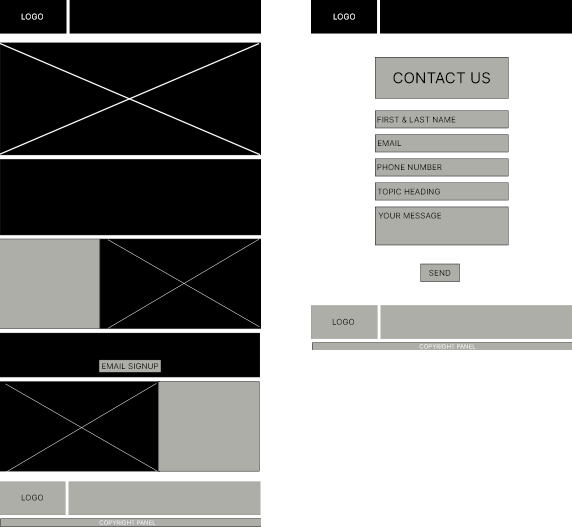
<style>
.page{position:relative;width:572px;height:527px;background:#ffffff}
.page>*{position:absolute;margin:0}
.t1{font:8px "Inter-Regular";text-transform:uppercase}
.t2{font:15px "Inter-Regular";color:#000000;text-transform:uppercase}
.t3{font:8px "Inter-Regular";color:#000000;text-transform:uppercase}
.t4{font:6px "Inter-Regular";color:#ffffff;text-transform:uppercase}
.t5{font:6px "Inter-Regular";text-transform:uppercase}
</style>
<div class="page">
<p class="t1" style="left:21px;top:13px;width:22px;height:7px">LOGO</p>
<p class="t1" style="left:333px;top:13px;width:22px;height:7px">LOGO</p>
<p class="t2" style="left:393px;top:72px;width:97px;height:12px">Contact US</p>
<p class="t3" style="left:377px;top:116px;width:79px;height:7px">First &amp; Last name</p>
<p class="t1" style="left:378px;top:140px;width:23px;height:6px">EMAIL</p>
<p class="t3" style="left:377px;top:164px;width:65px;height:6px">Phone Number</p>
<p class="t3" style="left:377px;top:188px;width:63px;height:7px">topic heading</p>
<p class="t1" style="left:378px;top:212px;width:63px;height:7px">Your Message</p>
<p class="t3" style="left:429px;top:269px;width:22px;height:7px">SEND</p>
<p class="t1" style="left:332px;top:318px;width:22px;height:7px">LOGO</p>
<p class="t4" style="left:419px;top:344px;width:57px;height:5px">Copyright Panel</p>
<p class="t3" style="left:102px;top:363px;width:57px;height:6px">EMAIL SIGNUP</p>
<p class="t1" style="left:21px;top:494px;width:22px;height:7px">LOGO</p>
<p class="t5" style="left:99px;top:520px;width:57px;height:5px">Copyright Panel</p>
</div>
